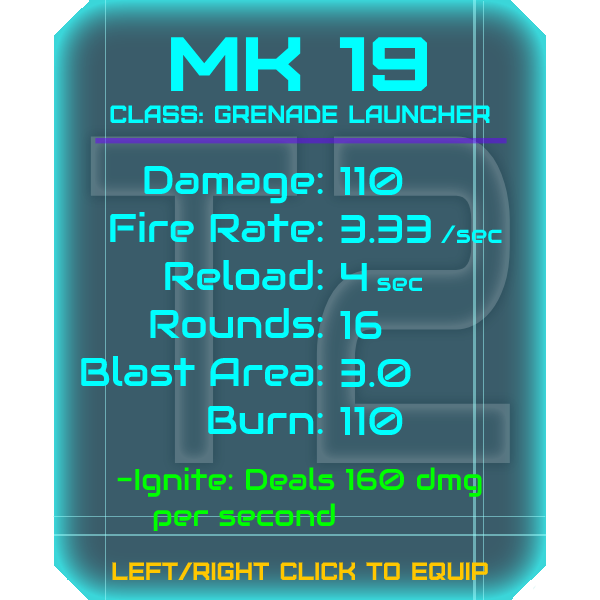
<style>
.page{position:relative;width:600px;height:600px;background:#3a5c6a}
.page>*{position:absolute;margin:0}
.t1{font:76.8px "Furore";color:#00ffff;scale:1.13 1}
.t2{font:25px "Furore";color:#00ffff}
.t3{font:40px "Audiowide-Regular";color:#00ffff}
.t4{font:25px "Audiowide-Regular";color:#00ffff}
.t5{font:30px "Audiowide-Regular";color:#00ff00}
.t6{font:40px "Audiowide-Regular";color:#00ff00}
.t7{font:25px "Furore";color:#ffc700}
</style>
<div class="page">
<p class="t1" style="left:171px;top:37px;width:256px;height:54px">Mk 19</p>
<p class="t2" style="left:110px;top:105px;width:380px;height:18px">Class: grenade launcher</p>
<p class="t3" style="left:81px;top:165px;width:242px;height:269px;text-align:right">Damage:<br>Fire Rate:<br>Reload:<br>Rounds:<br>Blast Area:<br>Burn:</p>
<p class="t3" style="left:340px;top:166px;width:162px;height:269px">110<br>3.33 <span class="t4">/sec<br></span>4 <span class="t4">sec<br></span>16<br>3.0<br>110</p>
<p class="t5" style="left:117px;top:467px;width:365px;height:64px"><span class="t6"><br><br><br><br><br><br></span>-Ignite: Deals 160 dmg<br> per second</p>
<p class="t7" style="left:112px;top:562px;width:376px;height:18px">left/right click to equip</p>
</div>
